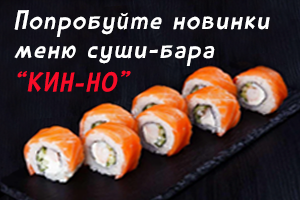
<style>
.page{position:relative;width:300px;height:200px}
.page>*{position:absolute;margin:0}
.t1{font:28px "TSSSFBartholomewC-Bold";letter-spacing:0.09em;color:#ffffff;font-style:italic}
.t2{font:28px "TSSSFBartholomewC-Bold";letter-spacing:0.09em;color:#f90c28;font-style:italic}
</style>
<div class="page">
<p class="t1" style="left:14px;top:10px;width:256px;height:27px">Попробуйте новинки</p>
<p class="t1" style="left:14px;top:45px;width:201px;height:47px">меню суши-бара <br><span class="t2">“КИН-НО”</span></p>
</div>
